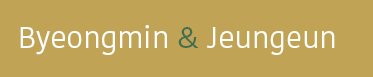
<style>
.page{position:relative;width:373px;height:77px;background:#c0a355}
.page>*{position:absolute;margin:0}
.t1{font:30px "KohinoorDevanagari-Regular";color:#ffffff}
.t2{font:30px "KohinoorDevanagari-Regular";color:#416e51}
.t3{font:30px "KohinoorDevanagari-Regular";color:#fffefb}
</style>
<div class="page">
<p class="t1" style="left:20px;top:25px;width:315px;height:30px">Byeongmin <span class="t2">&amp; </span><span class="t3">Jeungeun</span></p>
</div>
